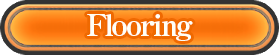
<style>
.page{position:relative;width:279px;height:55px}
.page>*{position:absolute;margin:0}
.t1{font:30px "RyuminPro-ExBold";letter-spacing:-0.08em;color:#fffff7}
</style>
<div class="page">
<p class="t1" style="left:87px;top:14px;width:106px;height:27px">Flooring</p>
</div>
